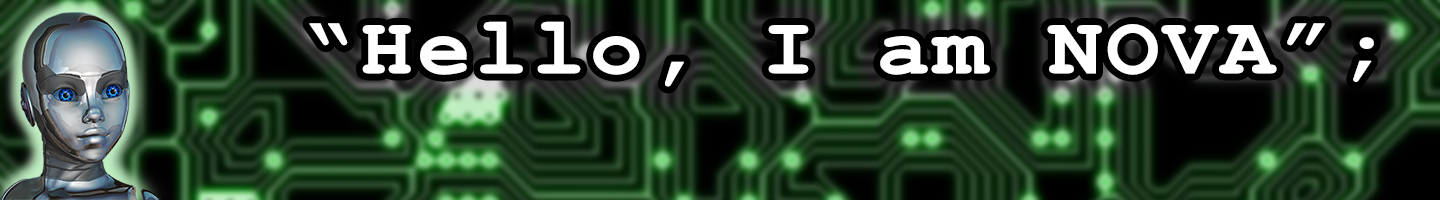
<style>
.page{position:relative;width:1440px;height:200px}
.page>*{position:absolute;margin:0}
.t1{font:80px "CourierNewPS-BoldMT";letter-spacing:0.025em;color:#ffffff;font-weight:bold;scale:1.1 1}
</style>
<div class="page">
<p class="t1" style="left:309px;top:21px;width:1065px;height:66px">“Hello, I am NOVA”;</p>
</div>
